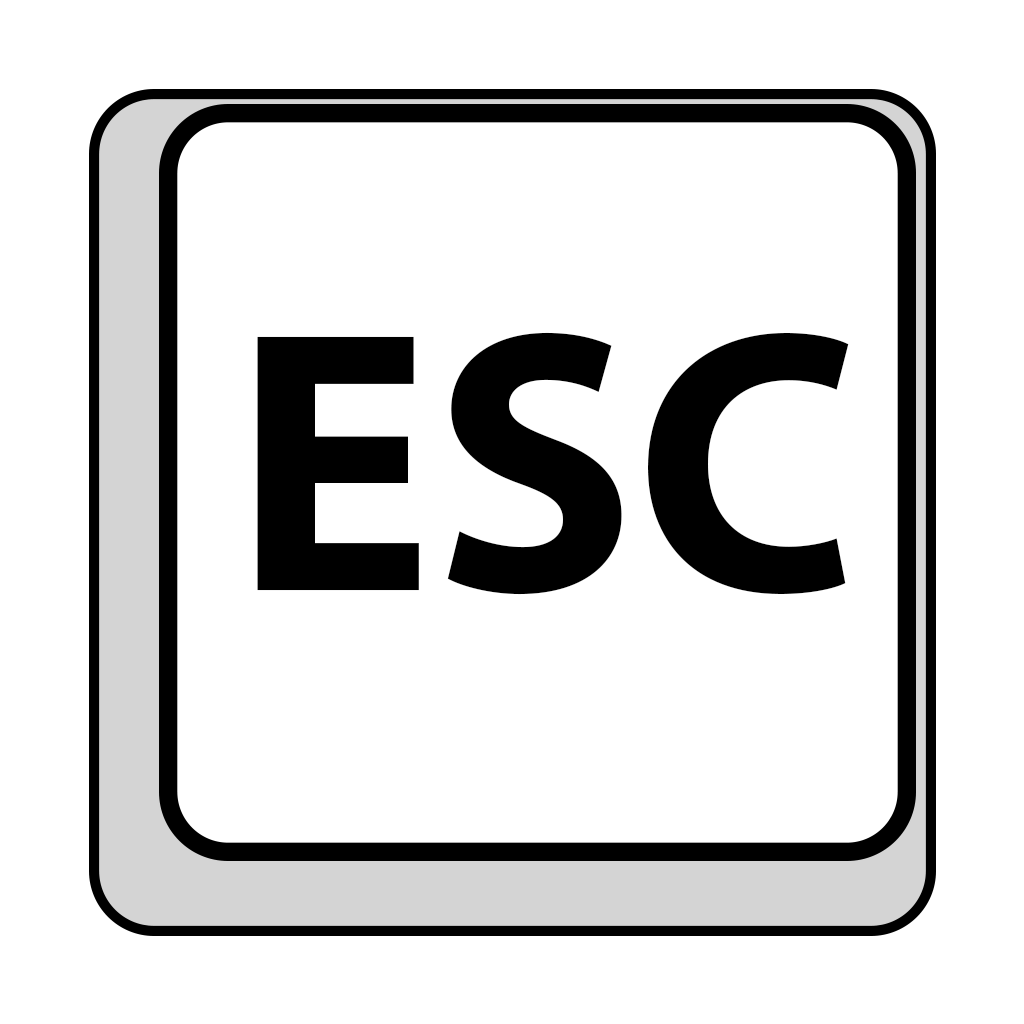
<style>
.page{position:relative;width:1024px;height:1024px;background:#ffffff}
.page>*{position:absolute;margin:0}
.t1{font:375px "MyriadPro-Bold";color:#000000}
.t2{font:625px "MyriadPro-Bold";color:#000000}
</style>
<div class="page">
<p class="t1" style="left:257px;top:332px;width:592px;height:263px">ESC<span class="t2">C</span></p>
</div>
